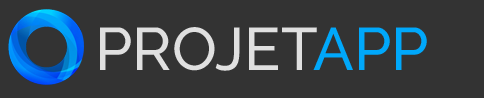
<style>
.page{position:relative;width:484px;height:98px;background:#333333}
.page>*{position:absolute;margin:0}
.t1{font:60px "Raleway-Medium";color:#e0e0e0}
.t2{font:60px "Raleway-Medium";color:#00a8fb}
</style>
<div class="page">
<p class="t1" style="left:100px;top:27px;width:327px;height:44px">PROJET<span class="t2">APP</span></p>
</div>
